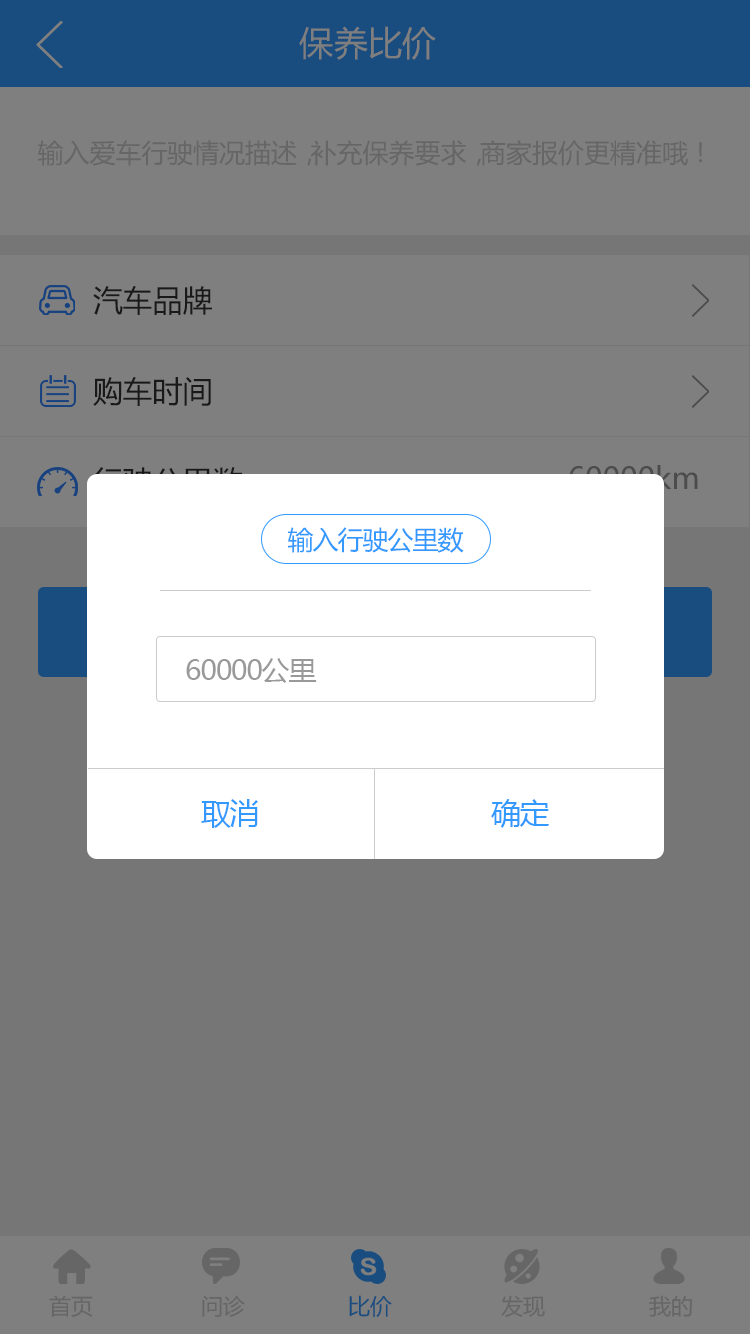
<style>
.page{position:relative;width:750px;height:1334px;background:#7f7f7f}
.page>*{position:absolute;margin:0}
.t1{font:34px "MicrosoftYaHei";color:#7f7f7f}
.t2{font:26px "MicrosoftYaHei";color:#666666}
.t3{font:30px "MicrosoftYaHei";color:#191919}
.t4{font:26px "MicrosoftYaHei";letter-spacing:-0.04em;color:#3399ff}
.t5{font:28px "MicrosoftYaHei";letter-spacing:-0.04em;color:#999999}
.t6{font:30px "MicrosoftYaHei";letter-spacing:-0.04em;color:#3399ff}
.t7{font:22px "MicrosoftYaHei";color:#666666}
.t8{font:22px "MicrosoftYaHei";color:#194c7f}
</style>
<div class="page">
<p class="t1" style="left:299px;top:26px;width:137px;height:34px">保养比价</p>
<p class="t2" style="left:38px;top:140px;width:665px;height:26px">输入爱车行驶情况描述，补充保养要求，商家报价更精准哦！</p>
<p class="t3" style="left:93px;top:286px;width:119px;height:29px">汽车品牌</p>
<p class="t3" style="left:93px;top:377px;width:118px;height:29px">购车时间</p>
<p class="t4" style="left:288px;top:527px;width:176px;height:26px">输入行驶公里数</p>
<p class="t5" style="left:186px;top:658px;width:131px;height:25px">60000公里</p>
<p class="t6" style="left:201px;top:799px;width:57px;height:29px">取消</p>
<p class="t6" style="left:491px;top:799px;width:58px;height:29px">确定</p>
<p class="t7" style="left:49px;top:1295px;width:44px;height:22px">首页</p>
<p class="t7" style="left:202px;top:1295px;width:43px;height:22px">问诊</p>
<p class="t8" style="left:349px;top:1295px;width:43px;height:22px">比价</p>
<p class="t7" style="left:501px;top:1295px;width:44px;height:22px">发现</p>
<p class="t7" style="left:649px;top:1295px;width:43px;height:22px">我的</p>
</div>
